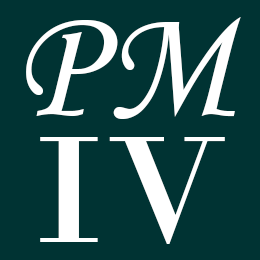
<style>
.page{position:relative;width:260px;height:260px;background:#003333}
.page>*{position:absolute;margin:0}
.t1{font:160px "MonotypeCorsiva";letter-spacing:0.045em;color:#ffffff;scale:0.96 1}
.t2{font:160px "BodoniMT";color:#ffffff;scale:1.08 1}
</style>
<div class="page">
<p class="t1" style="left:26px;top:17px;width:215px;height:102px">PM</p>
<p class="t2" style="left:40px;top:137px;width:185px;height:107px">IV</p>
</div>
